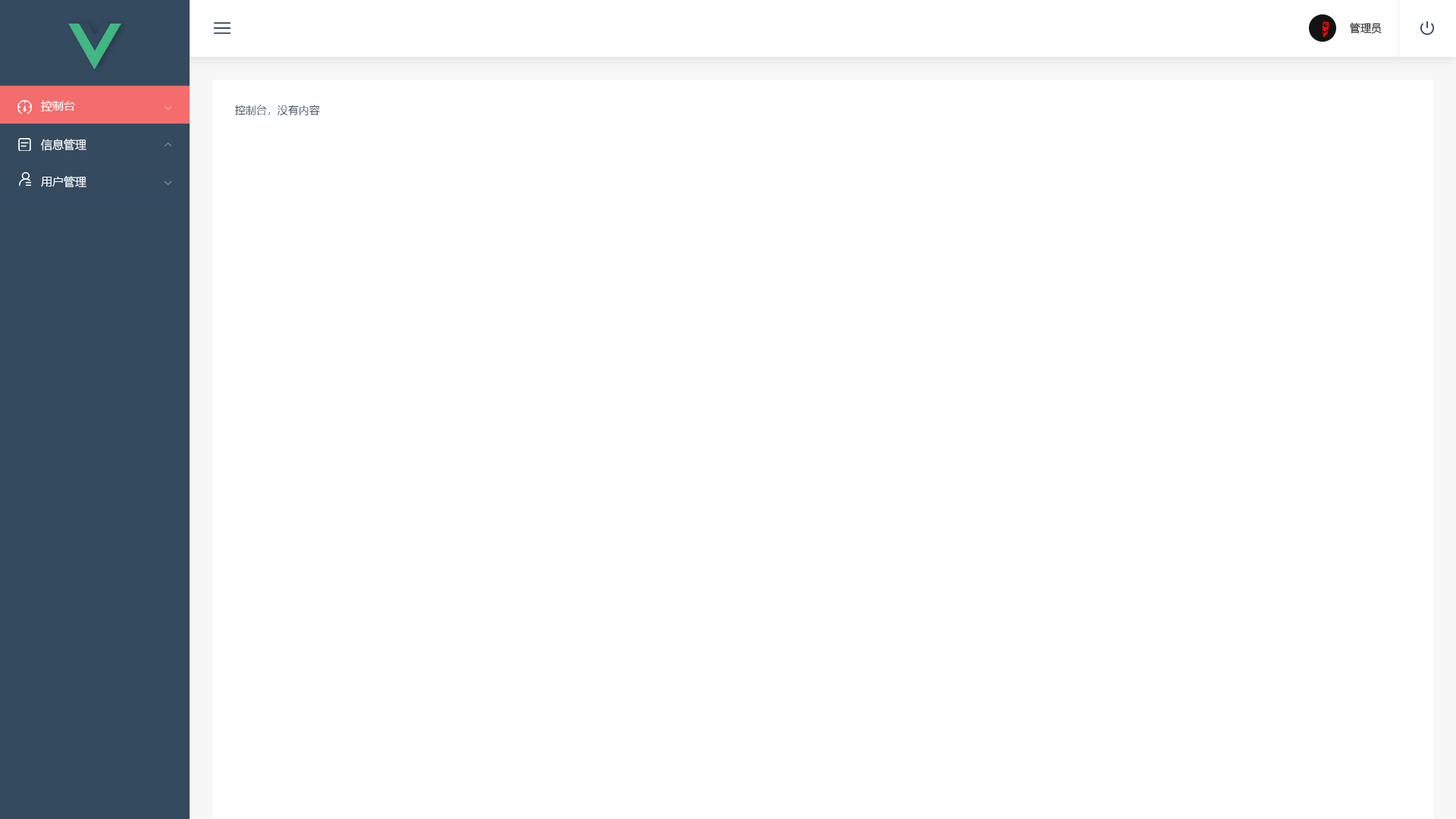
<style>
.page{position:relative;width:1456px;height:819px;background:#ffffff}
.page>*{position:absolute;margin:0}
.t1{font:10.6px "MicrosoftYaHei";color:#252525}
.t2{font:11.4px "MicrosoftYaHei";color:#ffffff}
.t3{font:10.6px "MicrosoftYaHeiLight";color:#344a5f}
</style>
<div class="page">
<p class="t1" style="left:1350px;top:23px;width:32px;height:11px">管理员</p>
<p class="t2" style="left:41px;top:100px;width:34px;height:12px">控制台</p>
<p class="t3" style="left:235px;top:105px;width:85px;height:10px">控制台，没有内容</p>
<p class="t2" style="left:41px;top:139px;width:45px;height:12px">信息管理</p>
<p class="t2" style="left:41px;top:176px;width:45px;height:11px">用户管理</p>
</div>
